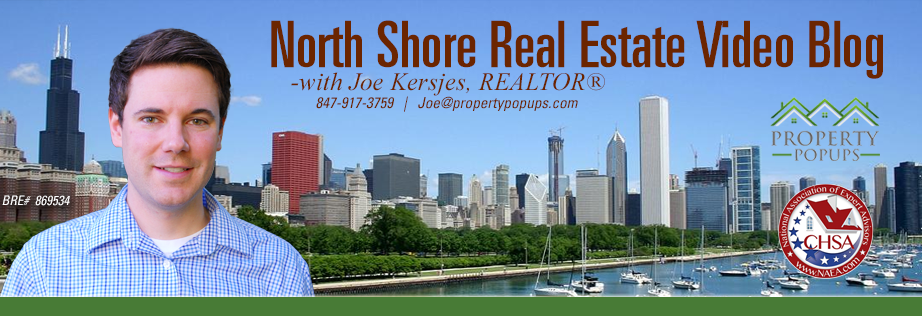
<style>
.page{position:relative;width:922px;height:316px}
.page>*{position:absolute;margin:0}
.t1{font:63.9px "UniversLT-UltraCondensed";color:#6b2500}
.t2{font:25.2px "TimesNewRomanPS-ItalicMT";color:#6b2500}
.t3{font:15.2px "UniversLT-CondensedOblique";color:#6b2500}
.t4{font:13px "UniversLT-CondensedOblique";color:#ffffff}
</style>
<div class="page">
<p class="t1" style="left:271px;top:20px;width:612px;height:59px">North Shore Real Estate Video Blog</p>
<p class="t2" style="left:291px;top:72px;width:314px;height:24px">-with Joe Kersjes, REALTOR®</p>
<p class="t3" style="left:316px;top:96px;width:262px;height:16px">847-917-3759   |   Joe@propertypopups.com</p>
<p class="t4" style="left:2px;top:195px;width:68px;height:11px">BRE#  869534</p>
</div>
